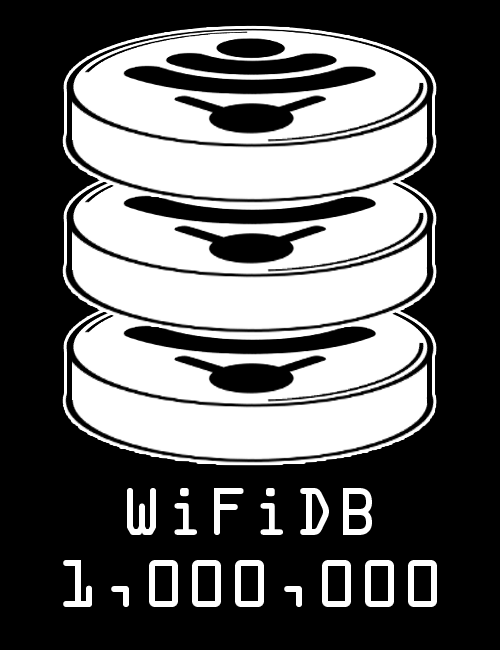
<style>
.page{position:relative;width:500px;height:650px;background:#000000}
.page>*{position:absolute;margin:0}
.t1{font:60px "OCRAStd";color:#ffffff}
</style>
<div class="page">
<p class="t1" style="left:63px;top:488px;width:374px;height:119px;text-align:center">WiFiDB<br>1,000,000</p>
</div>
